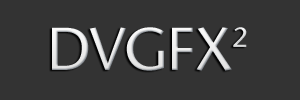
<style>
.page{position:relative;width:300px;height:100px;background:#333333}
.page>*{position:absolute;margin:0}
.t1{font:60px "Sapir";letter-spacing:-0.02em;color:#e6e6e6}
.t2{font:48px "Sapir";letter-spacing:-0.02em;color:#dadbdb}
</style>
<div class="page">
<p class="t1" style="left:52px;top:27px;width:180px;height:44px">DVGFX</p>
<p class="t2" style="left:233px;top:27px;width:14px;height:20px">2</p>
</div>
